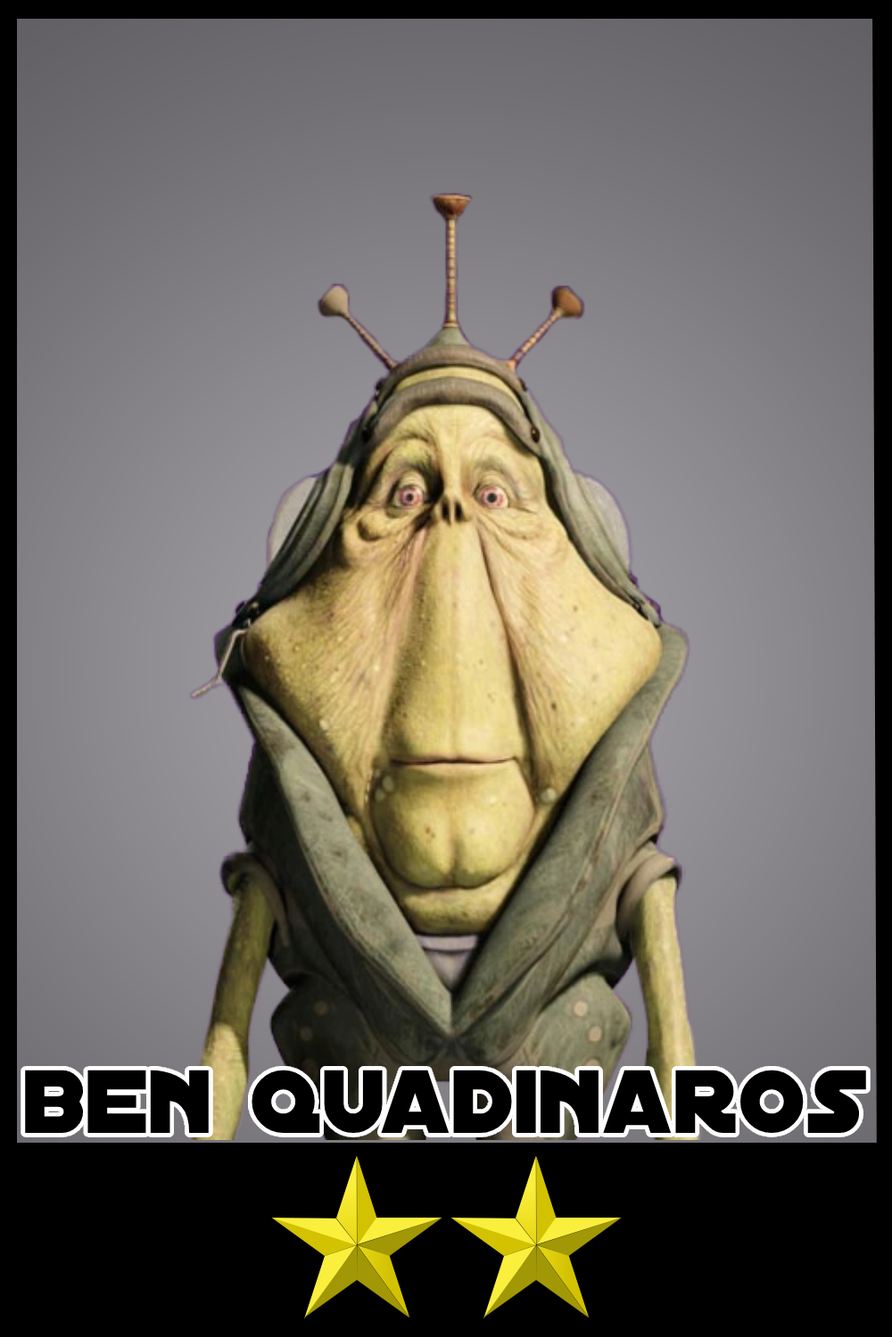
<style>
.page{position:relative;width:892px;height:1337px}
.page>*{position:absolute;margin:0}
.t1{font:96.5px "DistantGalaxy";color:#000000}
</style>
<div class="page">
<p class="t1" style="left:25px;top:1070px;width:841px;height:63px">ben quadinaros</p>
</div>
